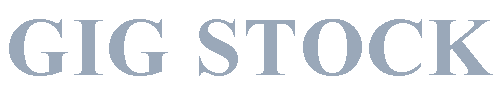
<style>
.page{position:relative;width:500px;height:94px;background:#ffffff}
.page>*{position:absolute;margin:0}
.t1{font:83px "TimesNewRomanPS-BoldMT";letter-spacing:0.02em;color:#8495a9;text-transform:uppercase}
</style>
<div class="page">
<p class="t1" style="left:9px;top:19px;width:484px;height:57px;opacity:0.82">GIG STOCK</p>
</div>
